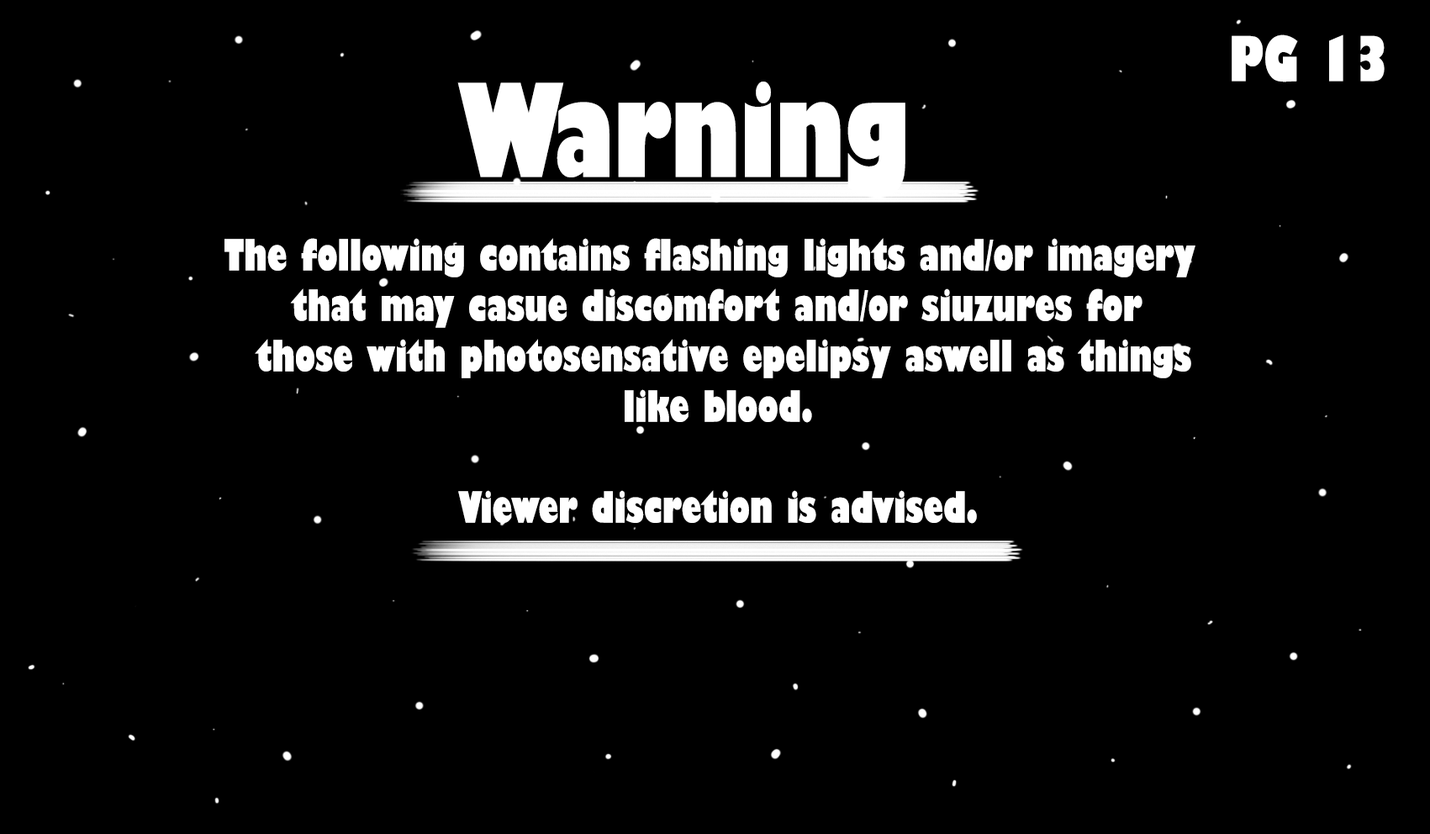
<style>
.page{position:relative;width:1430px;height:834px;background:#000000}
.page>*{position:absolute;margin:0}
.t1{font:60.5px "GillSans-UltraBoldCondensed";color:#ffffff}
.t2{font:126.1px "GillSans-UltraBoldCondensed";color:#ffffff}
.t3{font:42px "GillSans-UltraBoldCondensed";color:#ffffff}
</style>
<div class="page">
<p class="t1" style="left:1232px;top:34px;width:153px;height:48px">PG 13</p>
<p class="t2" style="left:457px;top:82px;width:448px;height:116px">Warning</p>
<p class="t3" style="left:224px;top:238px;width:971px;height:286px;text-align:center">The following contains flashing lights and/or imagery <br>that may casue discomfort and/or siuzures for<br> those with photosensative epelipsy aswell as things<br>like blood.<br><br>Viewer discretion is advised.</p>
</div>
